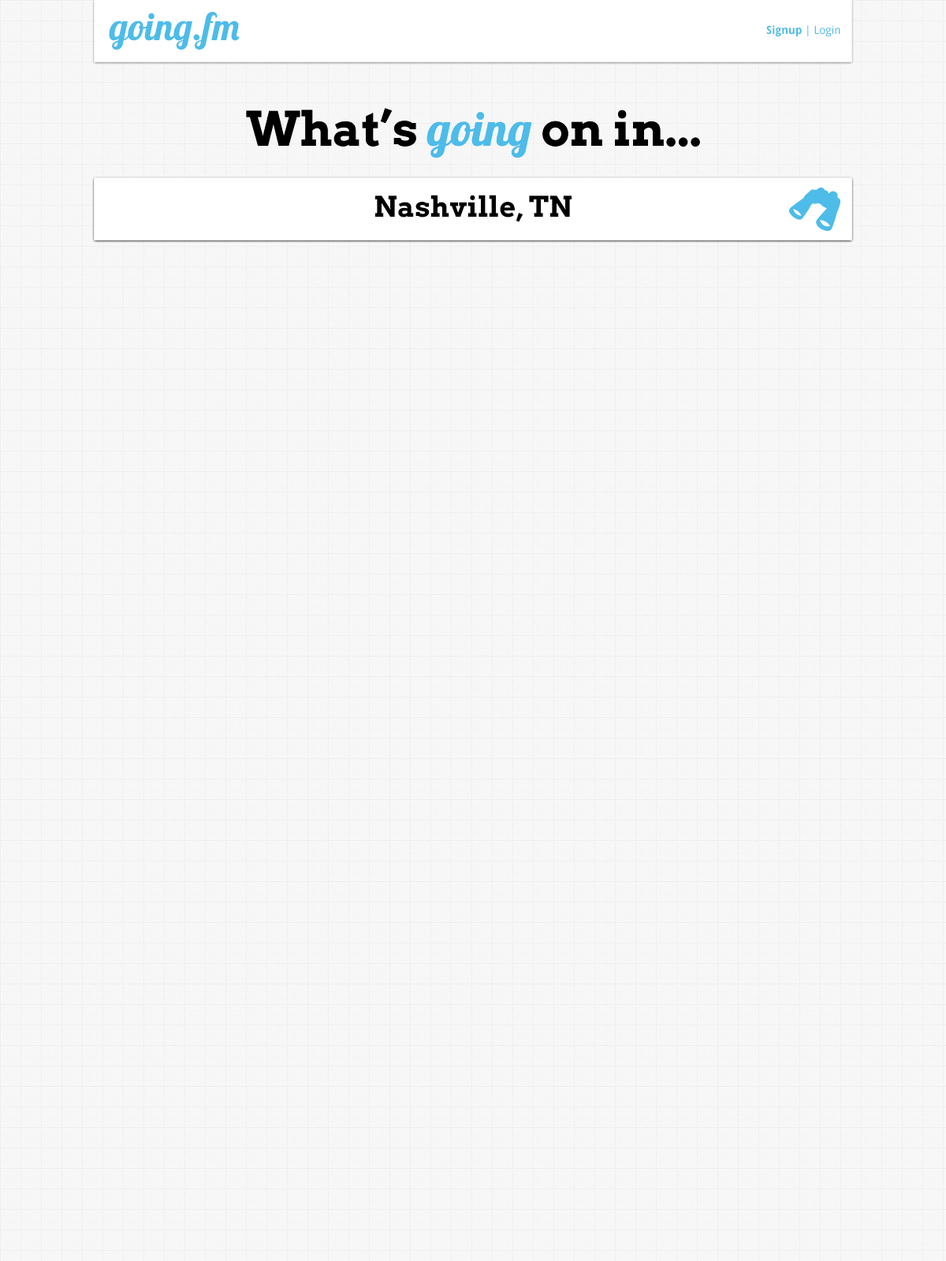
<style>
.page{position:relative;width:946px;height:1261px;background:#f7f7f7}
.page>*{position:absolute;margin:0}
.t1{font:37.8px "Lobster";color:#4dbce9}
.t2{font:11px "DroidSans";color:#4dbce9}
.t3{font:11px "DroidSans-Bold";color:#4dbce9}
.t4{font:47.3px "Arvo-Bold";color:#000000}
.t5{font:47.3px "Lobster";color:#4dbce9}
.t6{font:28.4px "Arvo-Bold";color:#000000}
</style>
<div class="page">
<p class="t1" style="left:109px;top:12px;width:131px;height:38px">going.fm</p>
<p class="t2" style="left:766px;top:25px;width:74px;height:12px"><span class="t3">Signup</span> | Login</p>
<p class="t4" style="left:246px;top:108px;width:454px;height:50px">What’s <span class="t5">going</span> on in...</p>
<p class="t4" style="left:246px;top:108px;width:454px;height:50px">What’s <span class="t5">going</span> on in...</p>
<p class="t6" style="left:375px;top:195px;width:196px;height:27px">Nashville, TN</p>
</div>
